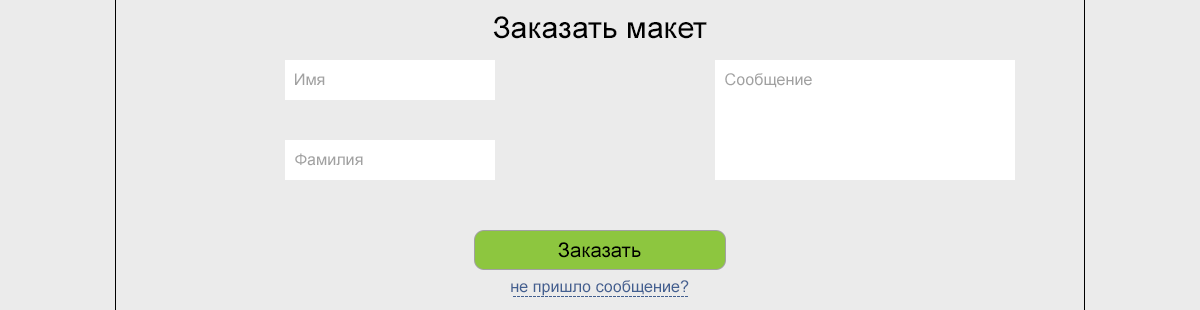
<style>
.page{position:relative;width:1200px;height:310px;background:#ebebeb}
.page>*{position:absolute;margin:0}
.t1{font:30px "ArialMT";color:#000000}
.t2{font:16px "ArialMT";color:#a1a1a1}
.t3{font:20px "ArialMT";color:#000000}
.t4{font:16px "ArialMT";color:#425f90}
</style>
<div class="page">
<p class="t1" style="left:493px;top:16px;width:214px;height:23px">Заказать макет</p>
<p class="t2" style="left:295px;top:73px;width:30px;height:12px">Имя</p>
<p class="t2" style="left:725px;top:73px;width:87px;height:15px">Сообщение</p>
<p class="t2" style="left:295px;top:153px;width:68px;height:13px">Фамилия</p>
<p class="t3" style="left:558px;top:242px;width:83px;height:16px">Заказать</p>
<p class="t4" style="left:511px;top:280px;width:178px;height:16px">не пришло сообщение?</p>
</div>
